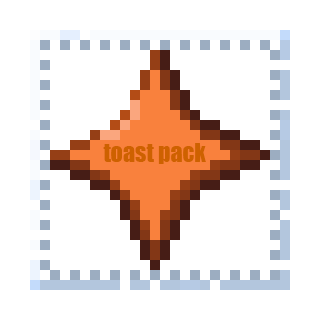
<style>
.page{position:relative;width:320px;height:320px;background:#ffffff}
.page>*{position:absolute;margin:0}
.t1{font:24px "Impact";color:#ce6100}
</style>
<div class="page">
<p class="t1" style="left:103px;top:143px;width:103px;height:21px">toast pack</p>
</div>
